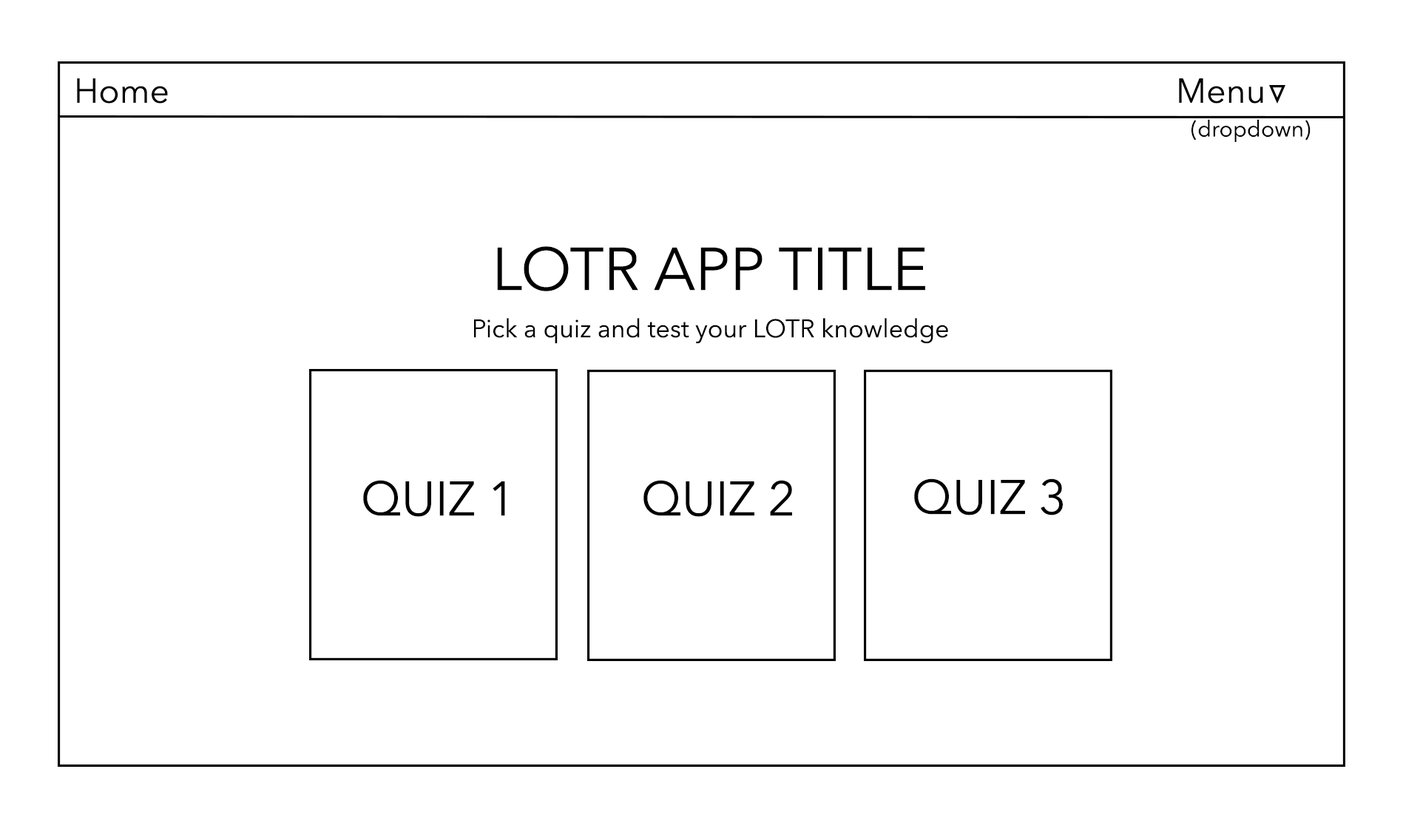
<style>
.page{position:relative;width:1420px;height:840px;background:#ffffff}
.page>*{position:absolute;margin:0}
.t1{font:34.3px "AvenirNext-Regular";color:#000000}
.t2{font:22.2px "AvenirNext-Regular";color:#000000}
.t3{font:59.8px "AvenirNext-Regular";color:#000000}
.t4{font:25.1px "AvenirNext-Regular";color:#000000}
.t5{font:48.1px "AvenirNext-Regular";color:#000000}
</style>
<div class="page">
<p class="t1" style="left:77px;top:78px;width:91px;height:26px">Home</p>
<p class="t1" style="left:1179px;top:78px;width:84px;height:26px">Menu</p>
<p class="t2" style="left:1191px;top:119px;width:119px;height:23px">(dropdown)</p>
<p class="t3" style="left:497px;top:246px;width:428px;height:45px">LOTR APP TITLE</p>
<p class="t4" style="left:474px;top:318px;width:474px;height:26px">Pick a quiz and test your LOTR knowledge</p>
<p class="t5" style="left:363px;top:480px;width:142px;height:37px">QUIZ 1</p>
<p class="t5" style="left:643px;top:480px;width:149px;height:37px">QUIZ 2</p>
<p class="t5" style="left:914px;top:478px;width:149px;height:37px">QUIZ 3</p>
</div>
